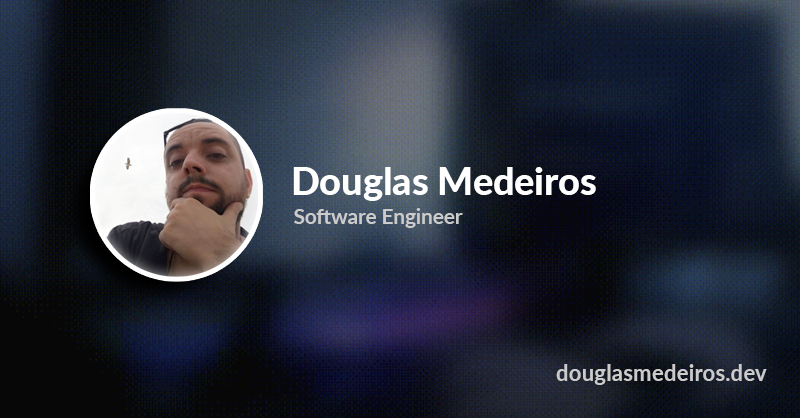
<style>
.page{position:relative;width:800px;height:418px}
.page>*{position:absolute;margin:0}
.t1{font:37.7px "Lato-Heavy";color:#ffffff}
.t2{font:20.7px "Lato-Bold";color:#cbcbcb}
.t3{font:22.5px "Lato-Bold";color:#cbcbcb}
</style>
<div class="page">
<p class="t1" style="left:293px;top:167px;width:303px;height:34px">Douglas Medeiros</p>
<p class="t2" style="left:294px;top:208px;width:169px;height:20px">Software Engineer</p>
<p class="t3" style="left:556px;top:364px;width:211px;height:21px">douglasmedeiros.dev</p>
</div>
